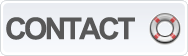
<style>
.page{position:relative;width:188px;height:56px}
.page>*{position:absolute;margin:0}
.t1{font:30px "Arial-BoldMT";letter-spacing:-0.09em;color:#585858}
</style>
<div class="page">
<p class="t1" style="left:6px;top:17px;width:129px;height:23px">CONTACT</p>
</div>
